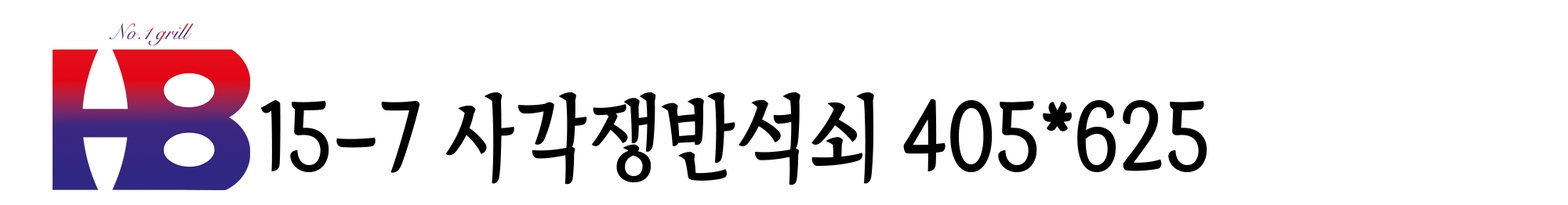
<style>
.page{position:relative;width:1568px;height:205px;background:#ffffff}
.page>*{position:absolute;margin:0}
.t1{font:93.7px "TheIndependenceHallofKorea-Regular";color:#000000;scale:0.89 1}
</style>
<div class="page">
<p class="t1" style="left:261px;top:93px;width:946px;height:93px">15-7 사각쟁반석쇠 405*625</p>
</div>
